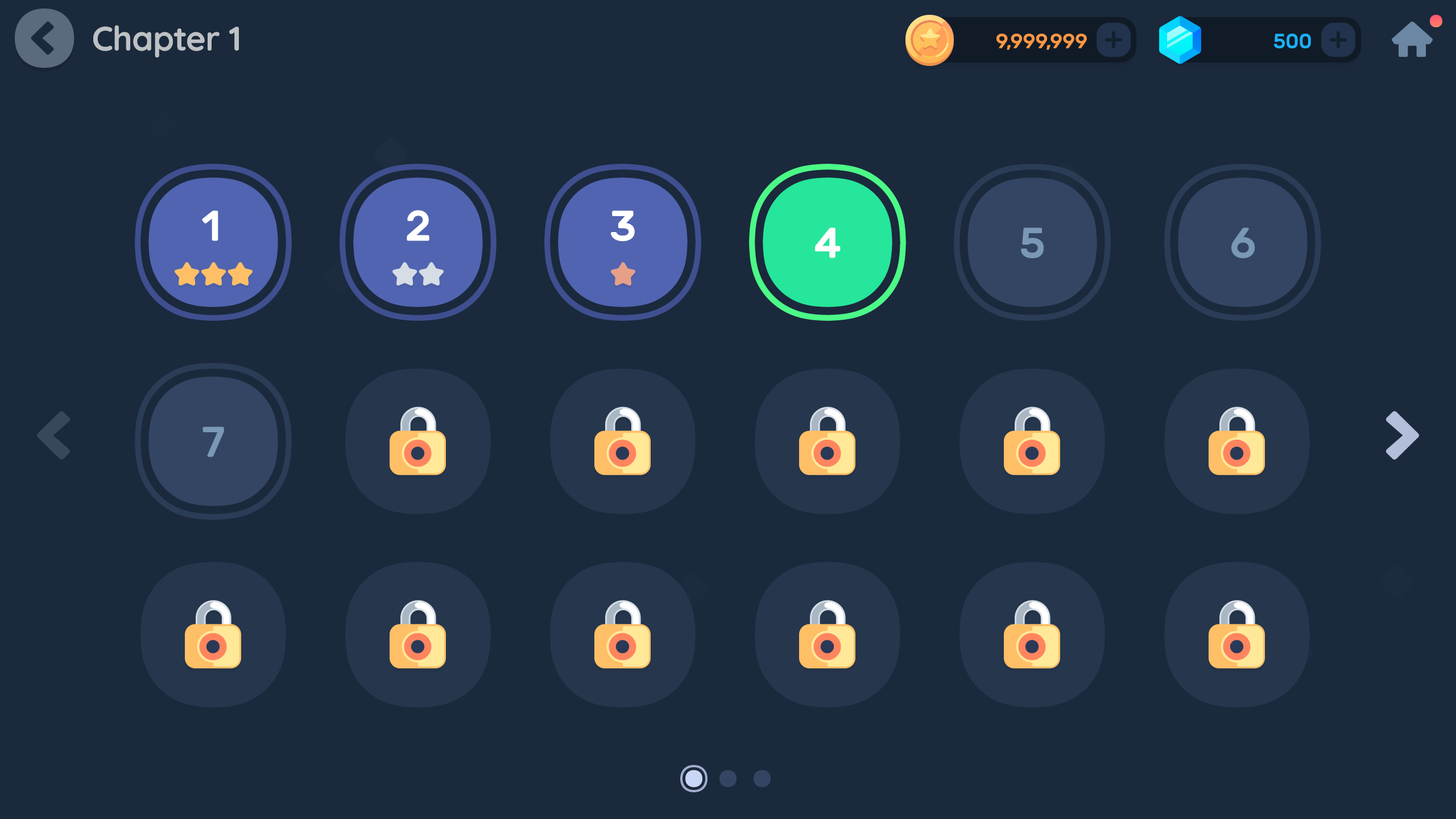
<style>
.page{position:relative;width:1456px;height:819px;background:#1a293c}
.page>*{position:absolute;margin:0}
.t1{font:34.1px "Quicksand-Bold";letter-spacing:-0.01em;color:#bdc1c4}
.t2{font:20.5px "Rubik-Medium";letter-spacing:-0.01em;color:#fd9744;text-transform:uppercase}
.t3{font:20.5px "Rubik-Medium";letter-spacing:-0.01em;color:#1cb0f6;text-transform:uppercase}
.t4{font:42.7px "Rubik-Medium";color:#ffffff}
.t5{font:42.7px "Rubik-Medium";color:#7a98b6}
</style>
<div class="page">
<p class="t1" style="left:93px;top:25px;width:146px;height:32px">Chapter 1</p>
<p class="t2" style="left:996px;top:34px;width:91px;height:16px">9,999,999</p>
<p class="t3" style="left:1274px;top:34px;width:37px;height:14px">500</p>
<p class="t4" style="left:407px;top:210px;width:22px;height:31px">2</p>
<p class="t4" style="left:202px;top:210px;width:16px;height:31px">1</p>
<p class="t4" style="left:611px;top:210px;width:24px;height:31px">3</p>
<p class="t4" style="left:815px;top:227px;width:26px;height:31px">4</p>
<p class="t5" style="left:1021px;top:227px;width:23px;height:31px">5</p>
<p class="t5" style="left:1231px;top:227px;width:24px;height:31px">6</p>
<p class="t5" style="left:202px;top:427px;width:22px;height:30px">7</p>
</div>
